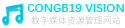
<style>
.page{position:relative;width:125px;height:28px;background:#ffffff}
.page>*{position:absolute;margin:0}
.t1{font:12px "DengXian-Bold";color:#00d9e6}
.t2{font:9px "DengXian";color:#c8c8c8}
</style>
<div class="page">
<p class="t1" style="left:27px;top:4px;width:97px;height:8px">CONGB19 VISION</p>
<p class="t2" style="left:31px;top:16px;width:90px;height:9px">数字媒体资源管理网站</p>
</div>
